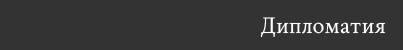
<style>
.page{position:relative;width:403px;height:50px;background:#333333}
.page>*{position:absolute;margin:0}
.t1{font:24px "CrimsonText-Regular";color:#ffffff}
</style>
<div class="page">
<p class="t1" style="left:260px;top:17px;width:126px;height:21px">Дипломатия</p>
</div>
